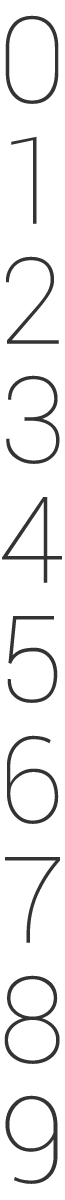
<style>
.page{position:relative;width:65px;height:1200px;background:#ffffff}
.page>*{position:absolute;margin:0}
.t1{font:120px "Roboto-Thin";color:#333333}
</style>
<div class="page">
<p class="t1" style="left:5px;top:15px;width:54px;height:89px">0</p>
<p class="t1" style="left:11px;top:136px;width:26px;height:88px">1</p>
<p class="t1" style="left:6px;top:256px;width:53px;height:88px">2</p>
<p class="t1" style="left:6px;top:375px;width:54px;height:89px">3</p>
<p class="t1" style="left:2px;top:497px;width:60px;height:86px">4</p>
<p class="t1" style="left:7px;top:616px;width:51px;height:87px">5</p>
<p class="t1" style="left:7px;top:735px;width:52px;height:89px">6</p>
<p class="t1" style="left:5px;top:857px;width:55px;height:86px">7</p>
<p class="t1" style="left:4px;top:975px;width:56px;height:89px">8</p>
<p class="t1" style="left:5px;top:1095px;width:53px;height:89px">9</p>
</div>
